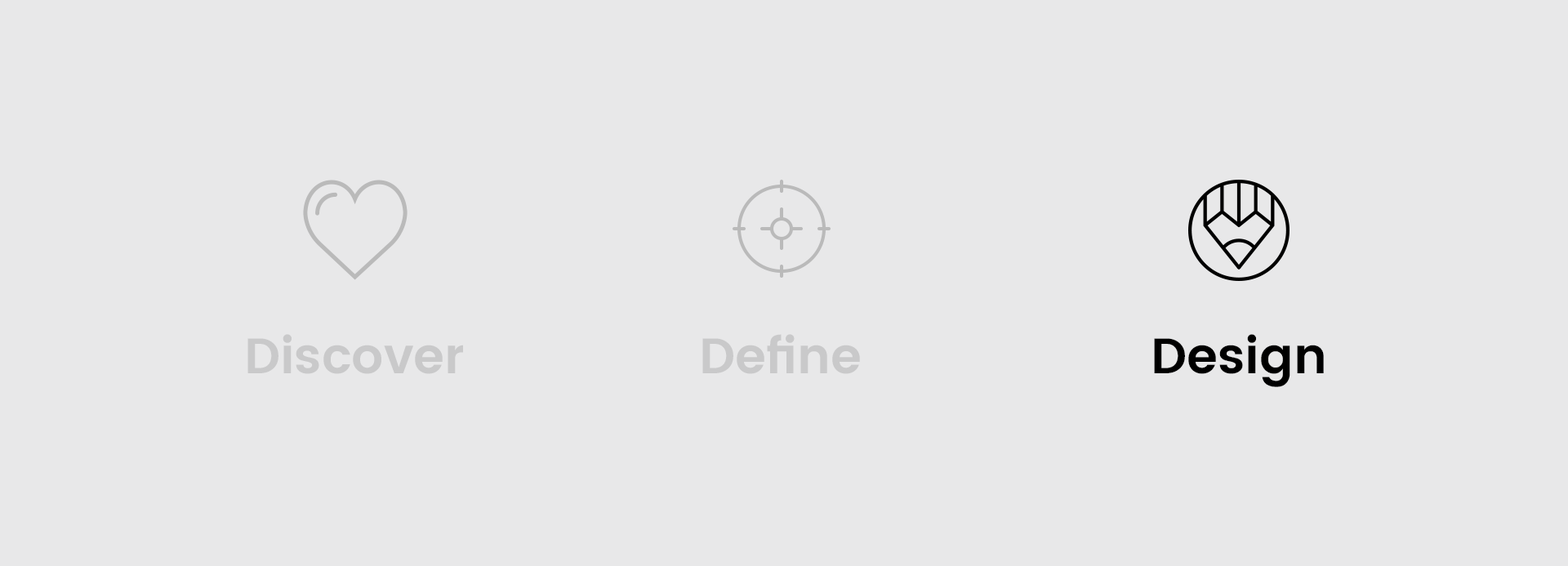
<style>
.page{position:relative;width:1568px;height:566px;background:#e8e8e9}
.page>*{position:absolute;margin:0}
.t1{font:49.8px "Poppins-SemiBold";color:#c9c9ca}
.t2{font:49.8px "Poppins-SemiBold";color:#000000}
</style>
<div class="page">
<p class="t1" style="left:247px;top:334px;width:216px;height:40px">Discover</p>
<p class="t1" style="left:702px;top:334px;width:158px;height:40px">Define</p>
<p class="t2" style="left:1154px;top:334px;width:170px;height:53px">Design</p>
</div>
